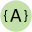
<style>
.page{position:relative;width:32px;height:32px;background:#c2e1a9}
.page>*{position:absolute;margin:0}
.t1{font:14px "Calibri";color:#000000}
.t2{font:20px "Calibri";color:#000000}
</style>
<div class="page">
<p class="t1" style="left:3px;top:10px;width:25px;height:12px">{     }</p>
<p class="t2" style="left:10px;top:9px;width:12px;height:13px">A</p>
</div>
